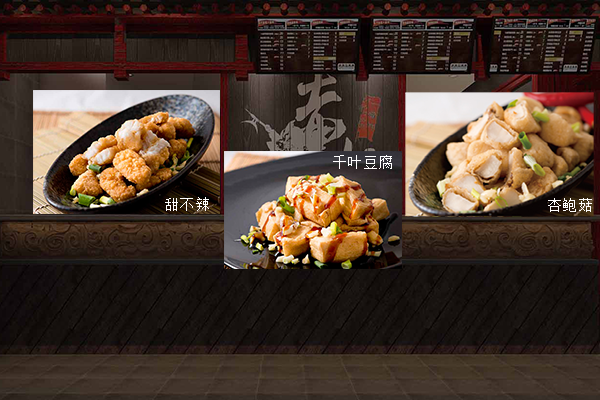
<style>
.page{position:relative;width:600px;height:400px}
.page>*{position:absolute;margin:0}
.t1{font:15.5px "SimSun";color:#ffffff}
</style>
<div class="page">
<p class="t1" style="left:333px;top:155px;width:59px;height:14px">千叶豆腐</p>
<p class="t1" style="left:165px;top:197px;width:44px;height:14px">甜不辣</p>
<p class="t1" style="left:548px;top:198px;width:44px;height:14px">杏鲍菇</p>
</div>
